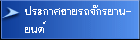
<style>
.page{position:relative;width:140px;height:40px}
.page>*{position:absolute;margin:0}
.t1{font:15.3px/18px "EucrosiaDSE";color:#ffffff;scale:1.12 1}
</style>
<div class="page">
<p class="t1" style="left:25px;top:5px;width:106px;height:28px">»ÃÐ¡ÒÈ¢ÒÂÃ¶¨Ñ¡ÃÂÒ¹-<br>Â¹µì</p>
</div>
